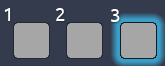
<style>
.page{position:relative;width:165px;height:66px;background:#343b4d}
.page>*{position:absolute;margin:0}
.t1{font:18.7px "Ubuntu";color:#ffffff}
</style>
<div class="page">
<p class="t1" style="left:4px;top:8px;width:7px;height:13px">1</p>
<p class="t1" style="left:56px;top:8px;width:9px;height:13px">2</p>
<p class="t1" style="left:111px;top:9px;width:9px;height:13px">3</p>
</div>
